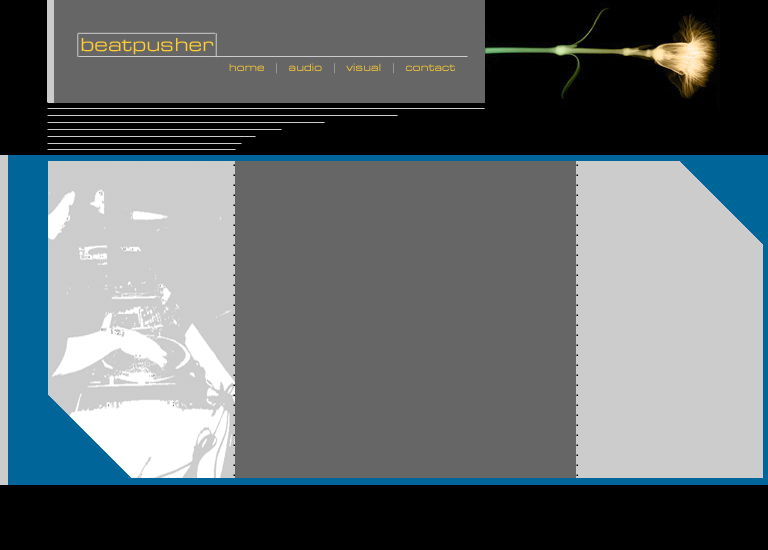
<style>
.page{position:relative;width:768px;height:550px;background:#666666}
.page>*{position:absolute;margin:0}
.t1{font:18px "Square721BT-RomanExtended";color:#ffcc33}
.t2{font:10px "Square721BT-RomanExtended";color:#ffcc33}
.t3{font:10px "Square721BT-RomanExtended";color:#cccccc}
.t4{font:10px/1px "Helvetica-Bold";color:#000000}
</style>
<div class="page">
<p class="t1" style="left:81px;top:38px;width:133px;height:17px">beatpusher</p>
<p class="t2" style="left:229px;top:63px;width:226px;height:11px">home  <span class="t3">|</span>  audio  <span class="t3">|</span>  visual  <span class="t3">|</span>  contact</p>
<p class="t4" style="left:233px;top:164px;width:2px;height:312px">................................</p>
</div>
